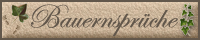
<style>
.page{position:relative;width:200px;height:40px}
.page>*{position:absolute;margin:0}
.t1{font:34px "EdwardianScriptITC";color:#62574b}
</style>
<div class="page">
<p class="t1" style="left:30px;top:4px;width:149px;height:33px">Bauernsprüche</p>
</div>
